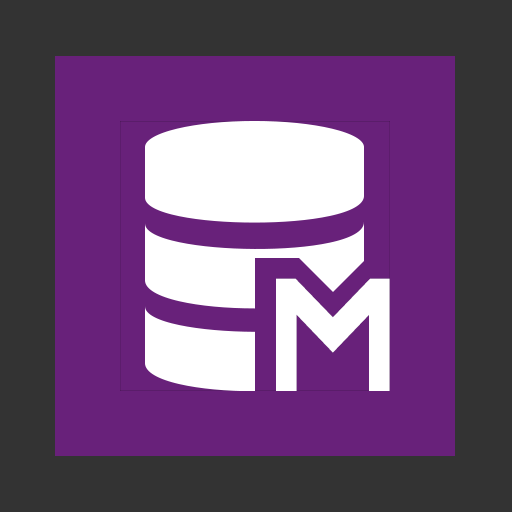
<style>
.page{position:relative;width:512px;height:512px;background:#68217a}
.page>*{position:absolute;margin:0}
.t1{font:143px "329-CAI978";color:#ffffff;scale:0.96 1}
</style>
<div class="page">
<p class="t1" style="left:276px;top:278px;width:114px;height:113px">M</p>
</div>
